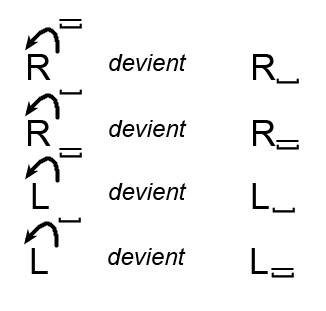
<style>
.page{position:relative;width:326px;height:311px;background:#ffffff}
.page>*{position:absolute;margin:0}
.t1{font:24px "ArialMT";color:#000000}
.t2{font:24px "ArialMT";color:#000000;scale:1.58 1}
.t3{font:36px "ArialMT";color:#000000}
.t4{font:24px "Arial-ItalicMT";color:#000000}
</style>
<div class="page">
<p class="t1" style="left:59px;top:23px;width:23px;height:6px;rotate:-90deg">[</p>
<p class="t2" style="left:59px;top:19px;width:23px;height:2px">_</p>
<p class="t3" style="left:28px;top:54px;width:23px;height:26px">R</p>
<p class="t4" style="left:109px;top:54px;width:78px;height:17px">devient</p>
<p class="t3" style="left:253px;top:54px;width:23px;height:26px">R</p>
<p class="t1" style="left:276px;top:78px;width:23px;height:6px;rotate:-90deg">[</p>
<p class="t1" style="left:59px;top:89px;width:23px;height:6px;rotate:-90deg">[</p>
<p class="t3" style="left:28px;top:120px;width:23px;height:26px">R</p>
<p class="t4" style="left:109px;top:120px;width:78px;height:17px">devient</p>
<p class="t3" style="left:253px;top:120px;width:23px;height:26px">R</p>
<p class="t2" style="left:59px;top:148px;width:23px;height:2px">_</p>
<p class="t1" style="left:276px;top:144px;width:23px;height:6px;rotate:-90deg">[</p>
<p class="t2" style="left:276px;top:140px;width:23px;height:2px">_</p>
<p class="t1" style="left:59px;top:152px;width:23px;height:6px;rotate:-90deg">[</p>
<p class="t3" style="left:32px;top:183px;width:17px;height:26px">L</p>
<p class="t4" style="left:109px;top:183px;width:78px;height:17px">devient</p>
<p class="t3" style="left:252px;top:183px;width:17px;height:26px">L</p>
<p class="t1" style="left:272px;top:207px;width:23px;height:6px;rotate:-90deg">[</p>
<p class="t1" style="left:58px;top:217px;width:23px;height:6px;rotate:-90deg">[</p>
<p class="t3" style="left:31px;top:248px;width:17px;height:26px">L</p>
<p class="t4" style="left:108px;top:248px;width:78px;height:17px">devient</p>
<p class="t3" style="left:251px;top:248px;width:17px;height:26px">L</p>
<p class="t2" style="left:271px;top:268px;width:23px;height:2px">_</p>
<p class="t1" style="left:271px;top:272px;width:23px;height:6px;rotate:-90deg">[</p>
</div>
